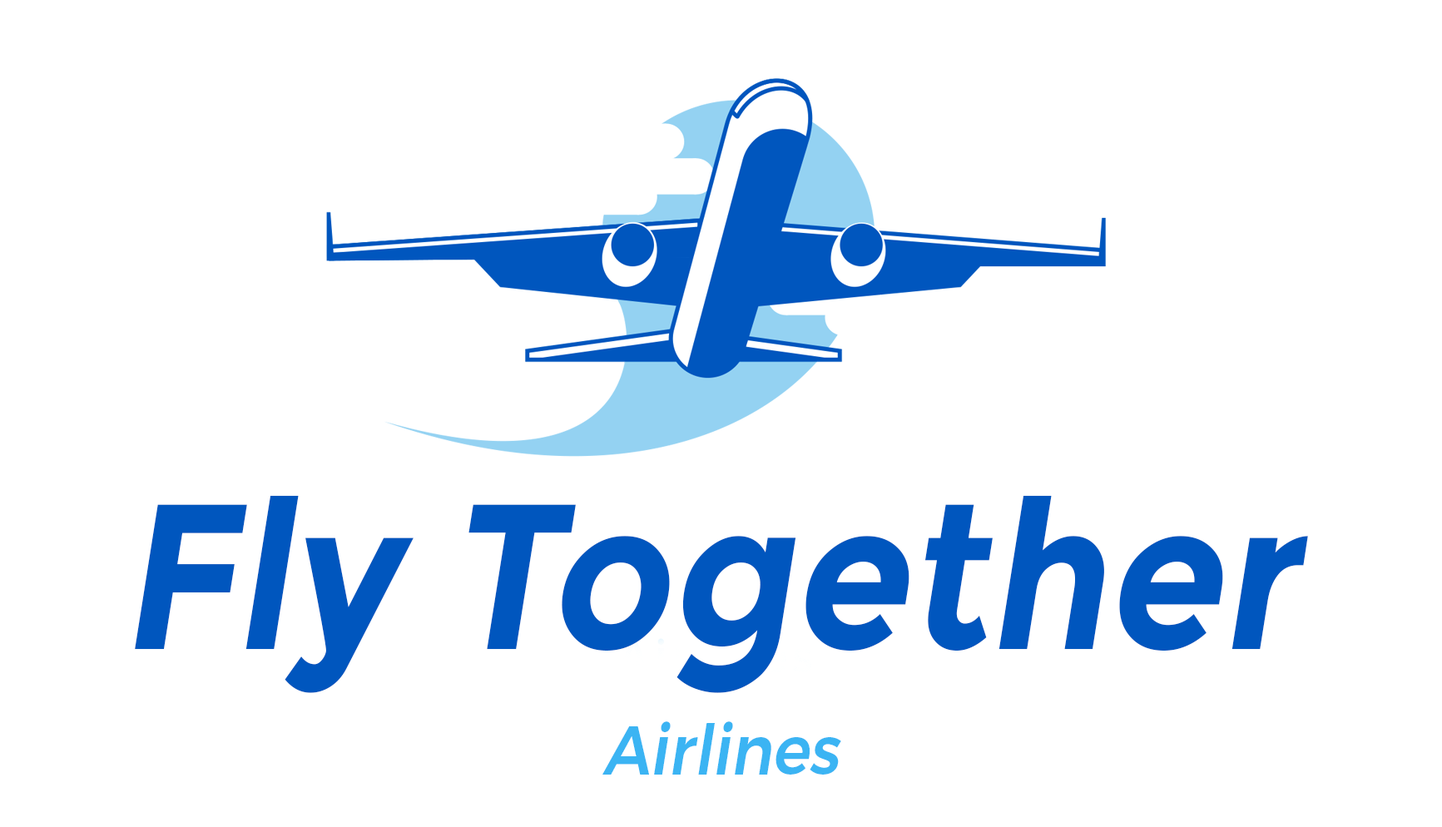
<style>
.page{position:relative;width:1442px;height:827px;background:#ffffff}
.page>*{position:absolute;margin:0}
.t1{font:206px "Montserrat-Bold";color:#0056be;font-style:italic;scale:0.9 1}
.t2{font:69.3px "Montserrat-Medium";color:#3bb4f3;font-style:italic;scale:0.9 1}
</style>
<div class="page">
<p class="t1" style="left:135px;top:495px;width:1173px;height:198px">Fly Together</p>
<p class="t2" style="left:602px;top:721px;width:239px;height:54px">Airlines</p>
</div>
